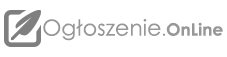
<style>
.page{position:relative;width:227px;height:57px;background:#ffffff}
.page>*{position:absolute;margin:0}
.t1{font:22px "CenturyGothic";color:#979797}
.t2{font:17px "CenturyGothic";color:#979797}
.t3{font:17px "CenturyGothic-Bold";color:#979797}
</style>
<div class="page">
<p class="t1" style="left:43px;top:19px;width:180px;height:22px">Ogłoszenie<span class="t2">.</span><span class="t3">OnLine</span></p>
</div>
